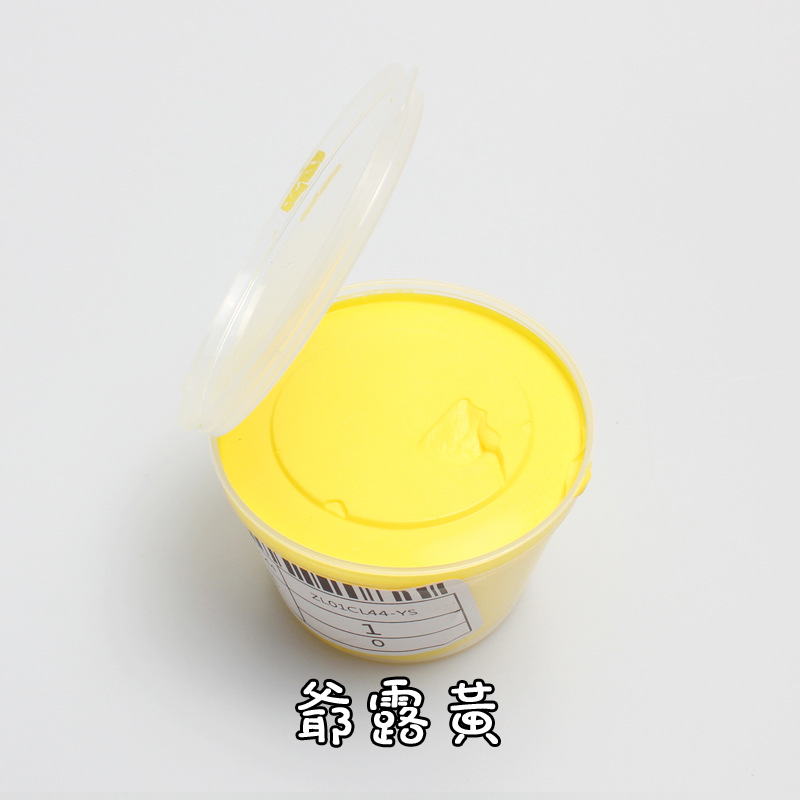
<style>
.page{position:relative;width:800px;height:800px}
.page>*{position:absolute;margin:0}
.t1{font:72px "DFPao-W4-WINP-BF";color:#ffffff;font-weight:bold}
</style>
<div class="page">
<p class="t1" style="left:298px;top:679px;width:200px;height:66px">爺露黃</p>
</div>
